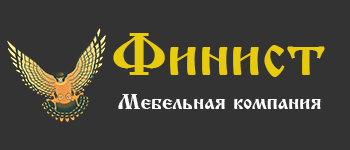
<style>
.page{position:relative;width:350px;height:150px;background:#333333}
.page>*{position:absolute;margin:0}
.t1{font:60px "IzhitsaCyrillic";color:#e7cb0c}
.t2{font:21px "IzhitsaCyrillic";color:#ffffff}
</style>
<div class="page">
<p class="t1" style="left:113px;top:33px;width:212px;height:44px">Финист</p>
<p class="t2" style="left:118px;top:94px;width:203px;height:15px">Мебельная компания</p>
</div>
